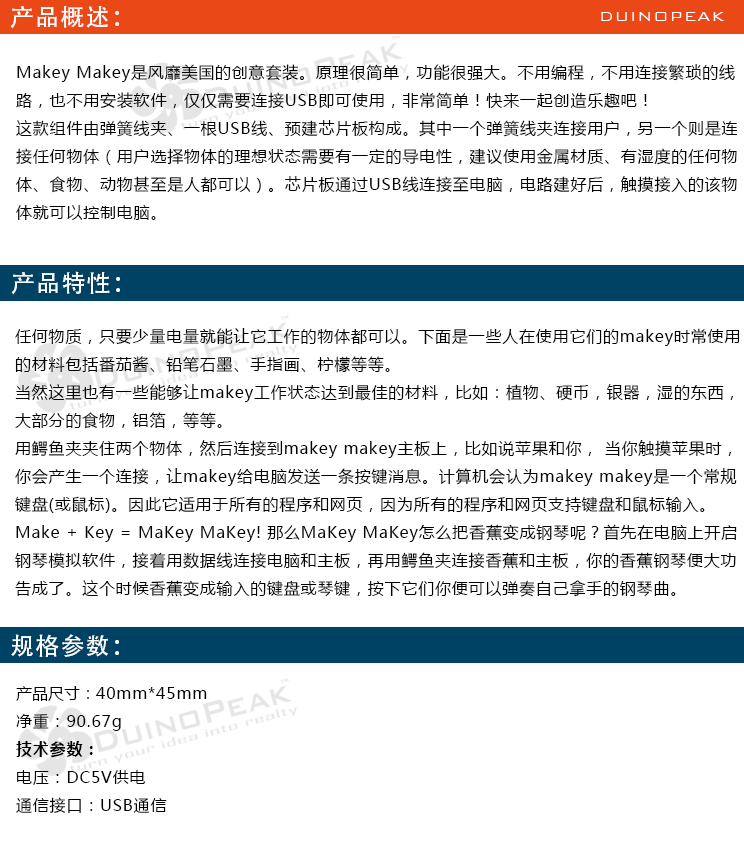
<style>
.page{position:relative;width:744px;height:850px;background:#ffffff}
.page>*{position:absolute;margin:0}
.t1{font:24px "AdobeHeitiStd-Regular";letter-spacing:0.05em;color:#ffffff}
.t2{font:18px "BankGothicBT-Light";letter-spacing:0.05em;color:#ffffff}
.t3{font:16px "MicrosoftYaHei";letter-spacing:0.05em;color:#000000}
.t4{font:16px "MicrosoftYaHei";color:#000000}
.t5{font:16px "MicrosoftYaHei-Bold";letter-spacing:0.05em;color:#000000}
</style>
<div class="page">
<p class="t1" style="left:10px;top:6px;width:109px;height:23px">产品概述：</p>
<p class="t2" style="left:601px;top:12px;width:124px;height:9px">DUINOPEAK</p>
<p class="t3" style="left:16px;top:64px;width:722px;height:156px">Makey Makey是风靡美国的创意套装。原理很简单，功能很强大。不用编程，不用连接繁琐的线<br>路，也不用安装软件，仅仅需要连接USB即可使用，非常简单！快来一起创造乐趣吧！<br>这款组件由弹簧线夹、一根USB线、预建芯片板构成。其中一个弹簧线夹连接用户，另一个则是连<br>接任何物体（用户选择物体的理想状态需要有一定的导电性，建议使用金属材质、有湿度的任何物<br>体、食物、动物甚至是人都可以）。芯片板通过USB线连接至电脑，电路建好后，触摸接入的该物<br>体就可以控制电脑。</p>
<p class="t1" style="left:11px;top:271px;width:109px;height:24px">产品特性：</p>
<p class="t3" style="left:15px;top:328px;width:725px;height:269px">任何物质，只要少量电量就能让它工作的物体都可以。下面是一些人在使用它们的makey时常使用<br>的材料包括番茄酱、铅笔石墨、手指画、柠檬等等。<br>当然这里也有一些能够让makey工作状态达到最佳的材料，比如：植物、硬币，银器，湿的东西，<br>大部分的食物，铝箔，等等。<br>用鳄鱼夹夹住两个物体，然后连接到makey makey主板上，比如说苹果和你， 当你触摸苹果时，<br>你会产生一个连接，让makey给电脑发送一条按键消息。计算机会认为makey makey是一个常规<br>键盘(或鼠标)。因此它适用于所有的程序和网页，因为所有的程序和网页支持键盘和鼠标输入。<br>Make + Key = MaKey MaKey! 那么MaKey MaKey怎么把香蕉变成钢琴呢？首先在电脑上开启<br>钢琴模拟软件，接着用数据线连接电脑和主板，再用鳄鱼夹连接香蕉和主板，你的香蕉钢琴便大功<br>告成了。这个时候香蕉变成输入的键盘或琴键，按下它们你便可以弹奏自己拿手的钢琴曲。</p>
<p class="t1" style="left:11px;top:634px;width:108px;height:23px">规格参数：</p>
<p class="t3" style="left:16px;top:686px;width:191px;height:127px"><span class="t4">产品尺寸：</span>40mm*45mm<br>净重：90.67g<br><span class="t5">技术参数：<br></span>电压：DC5V供电<br>通信接口：USB通信</p>
</div>
